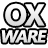
<style>
.page{position:relative;width:48px;height:48px;background:#ffffff}
.page>*{position:absolute;margin:0}
.t1{font:30.1px "SegoeUI-Bold";letter-spacing:-0.06em;color:#ededed}
.t2{font:17px "SegoeUI-Bold";letter-spacing:-0.06em;color:#ffffff;font-style:italic}
</style>
<div class="page">
<p class="t1" style="left:5px;top:3px;width:40px;height:23px">OX</p>
<p class="t2" style="left:1px;top:30px;width:46px;height:13px">WARE</p>
</div>
